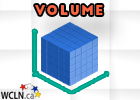
<style>
.page{position:relative;width:140px;height:100px;background:#ffffff}
.page>*{position:absolute;margin:0}
.t1{font:12.6px "BigJohn";letter-spacing:0.18em;color:#fb6542}
</style>
<div class="page">
<p class="t1" style="left:35px;top:5px;width:68px;height:10px">Volume</p>
</div>
